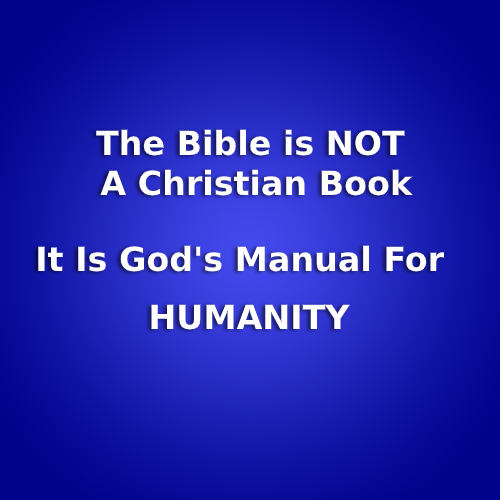
<style>
.page{position:relative;width:500px;height:500px}
.page>*{position:absolute;margin:0}
.t1{font:33.3px "DejaVuSans-Bold";color:#ffffff}
</style>
<div class="page">
<p class="t1" style="left:96px;top:129px;width:317px;height:67px;text-align:center">The Bible is NOT <br>A Christian Book</p>
<p class="t1" style="left:38px;top:245px;width:407px;height:27px">It Is God's Manual For</p>
<p class="t1" style="left:151px;top:304px;width:199px;height:26px">HUMANITY</p>
</div>
